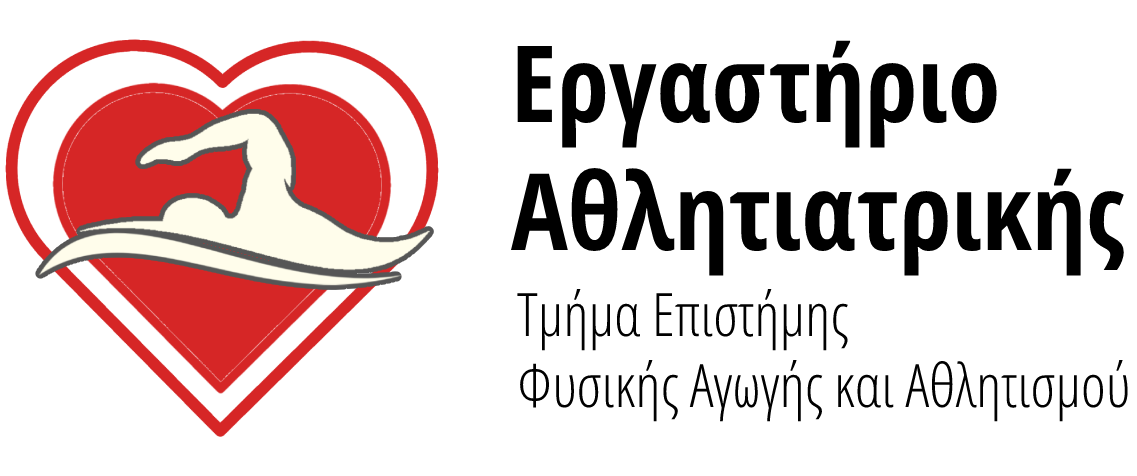
<style>
.page{position:relative;width:1137px;height:476px;background:#ffffff}
.page>*{position:absolute;margin:0}
.t1{font:106.3px "OpenSansCondensed-Bold";color:#000000}
.t2{font:59.7px "OpenSansCondensed-Light";color:#000000}
</style>
<div class="page">
<p class="t1" style="left:511px;top:40px;width:613px;height:236px">Εργαστήριο <br>Αθλητιατρικής</p>
<p class="t2" style="left:517px;top:289px;width:611px;height:133px">Τμήμα Επιστήμης <br>Φυσικής Αγωγής και Αθλητισμού</p>
</div>
